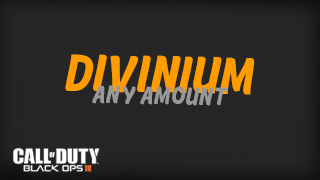
<style>
.page{position:relative;width:320px;height:180px;background:#262626}
.page>*{position:absolute;margin:0}
.t1{font:47px "Retrochips";color:#ff9c00}
.t2{font:22.6px "Retrochips";color:#989898}
</style>
<div class="page">
<p class="t1" style="left:65px;top:54px;width:190px;height:41px;rotate:1deg">DIVINIUM</p>
<p class="t2" style="left:92px;top:85px;width:136px;height:21px;rotate:1deg">aNY aMOUNT</p>
</div>
